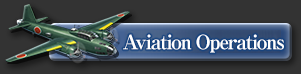
<style>
.page{position:relative;width:301px;height:74px;background:#333333}
.page>*{position:absolute;margin:0}
.t1{font:20px "RyuminPro-ExBold";letter-spacing:-0.08em;color:#ffffff}
</style>
<div class="page">
<p class="t1" style="left:123px;top:34px;width:161px;height:19px">Aviation Operations</p>
</div>
